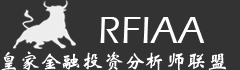
<style>
.page{position:relative;width:240px;height:70px;background:#333333}
.page>*{position:absolute;margin:0}
.t1{font:39.2px "ErasITC-Medium";color:#ffffff}
.t2{font:20.9px "STXinwei";color:#ffffff}
</style>
<div class="page">
<p class="t1" style="left:100px;top:17px;width:105px;height:26px">RFIAA</p>
<p class="t2" style="left:1px;top:51px;width:225px;height:20px">皇家金融投资分析师联盟</p>
</div>
